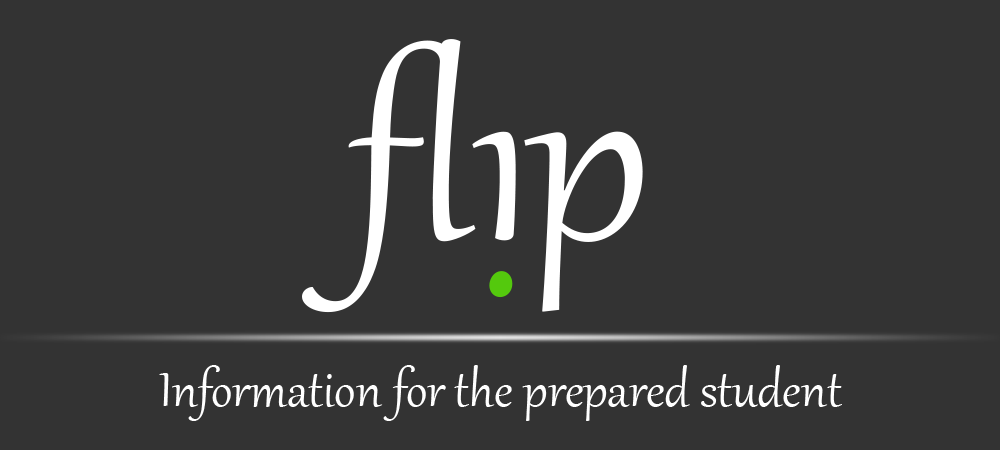
<style>
.page{position:relative;width:1000px;height:450px;background:#333333}
.page>*{position:absolute;margin:0}
.t1{font:300px "Gabriola";color:#ffffff}
.t2{font:60px "Gabriola";color:#ffffff}
</style>
<div class="page">
<p class="t1" style="left:302px;top:39px;width:341px;height:274px">fl p</p>
<p class="t2" style="left:159px;top:365px;width:683px;height:56px">Information for the prepared student</p>
</div>
